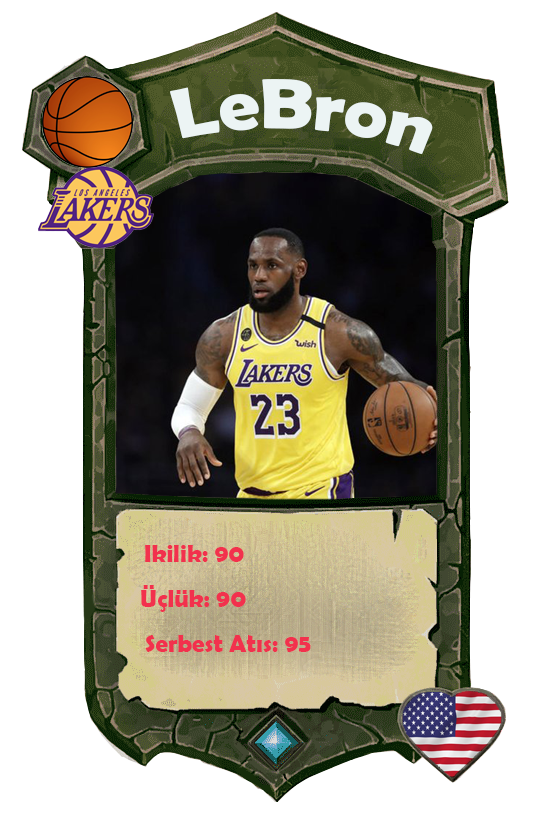
<style>
.page{position:relative;width:558px;height:814px;background:#ffffff}
.page>*{position:absolute;margin:0}
.t1{font:70.9px "BerlinSansFBDemi-Bold";color:#ecf4f4;scale:1.06 1}
.t2{font:25px "BerlinSansFBDemi-Bold";color:#f2314d}
</style>
<div class="page">
<p class="t1" style="left:170px;top:79px;width:263px;height:75px;rotate:4deg">LeBron</p>
<p class="t2" style="left:145px;top:545px;width:99px;height:17px">Ikilik: 90</p>
<p class="t2" style="left:141px;top:585px;width:105px;height:27px">Üçlük: 90</p>
<p class="t2" style="left:145px;top:635px;width:166px;height:17px">Serbest Atıs: 95</p>
</div>
